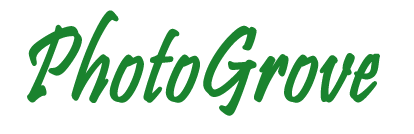
<style>
.page{position:relative;width:414px;height:134px;background:#ffffff}
.page>*{position:absolute;margin:0}
.t1{font:108px "Pristina-Regular";letter-spacing:0.005em;color:#1a832e;font-weight:bold;font-style:italic;scale:0.8 1}
</style>
<div class="page">
<p class="t1" style="left:27px;top:10px;width:353px;height:106px">PhotoGrove</p>
</div>
